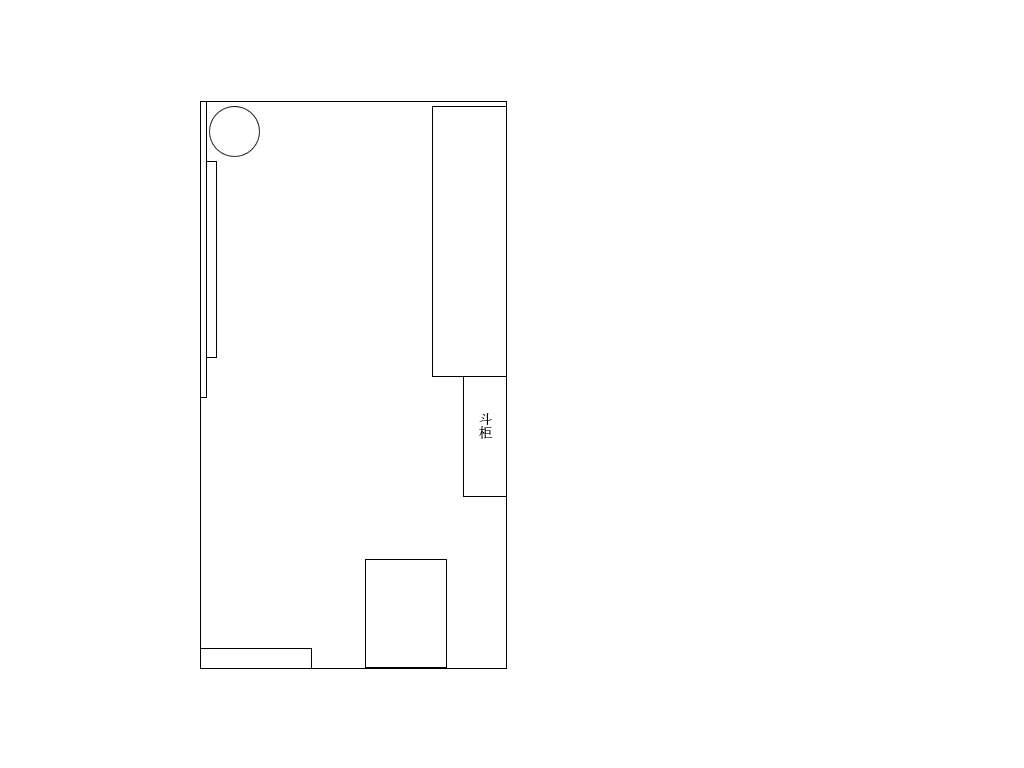
<style>
.page{position:relative;width:1024px;height:768px;background:#ffffff}
.page>*{position:absolute;margin:0}
.t1{font:14px "SimSun";color:#000000}
</style>
<div class="page">
<p class="t1" style="left:479px;top:413px;width:13px;height:26px">斗柜</p>
</div>
